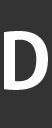
<style>
.page{position:relative;width:52px;height:128px;background:#333333}
.page>*{position:absolute;margin:0}
.t1{font:75px "AdobeGothicStd-Bold";color:#ffffff}
</style>
<div class="page">
<p class="t1" style="left:4px;top:31px;width:44px;height:59px">D</p>
</div>
